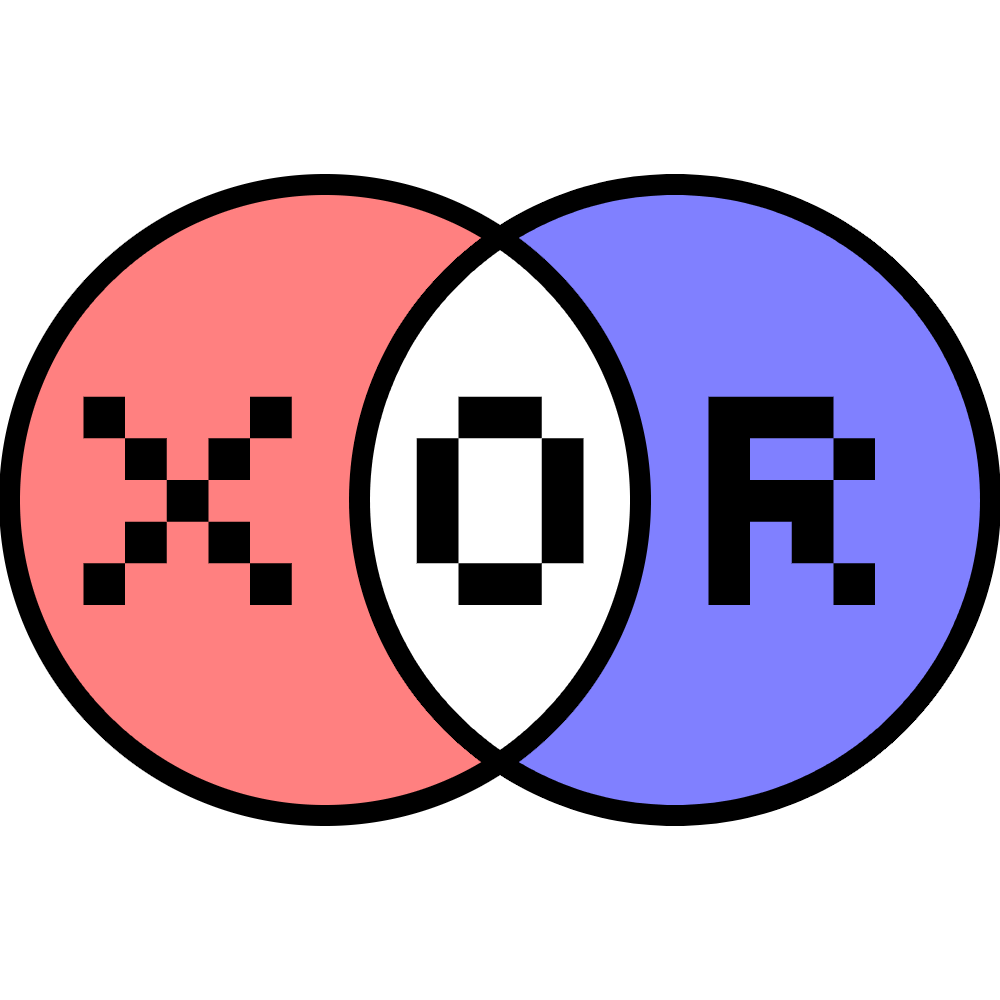
<style>
.page{position:relative;width:1000px;height:1000px;background:#ffffff}
.page>*{position:absolute;margin:0}
.t1{font:350px "Silkscreen-Expanded";color:#000000}
</style>
<div class="page">
<p class="t1" style="left:83px;top:396px;width:793px;height:209px">XOR</p>
</div>
